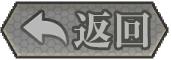
<style>
.page{position:relative;width:171px;height:60px}
.page>*{position:absolute;margin:0}
.t1{font:40px "RyuminPr6N-ExBold";color:#b8b8b7}
</style>
<div class="page">
<p class="t1" style="left:74px;top:11px;width:75px;height:37px">返回</p>
</div>
